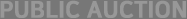
<style>
.page{position:relative;width:187px;height:19px;background:#777777}
.page>*{position:absolute;margin:0}
.t1{font:23px "NanumSquareEB";color:#989898;font-weight:bold;scale:0.97 1}
</style>
<div class="page">
<p class="t1" style="left:0px;top:0px;width:186px;height:18px">PUBLIC AUCTION</p>
</div>
